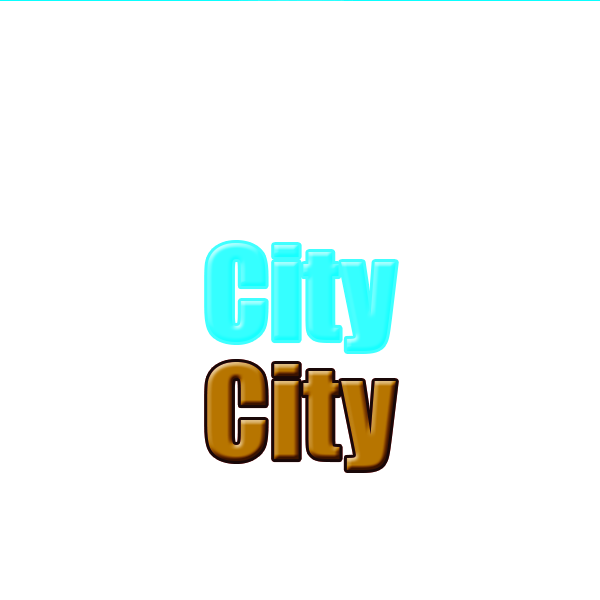
<style>
.page{position:relative;width:600px;height:600px;background:#ffffff}
.page>*{position:absolute;margin:0}
.t1{font:120px "Impact";color:#35ffff}
</style>
<div class="page">
<p class="t1" style="left:207px;top:242px;width:189px;height:108px">City</p>
</div>
